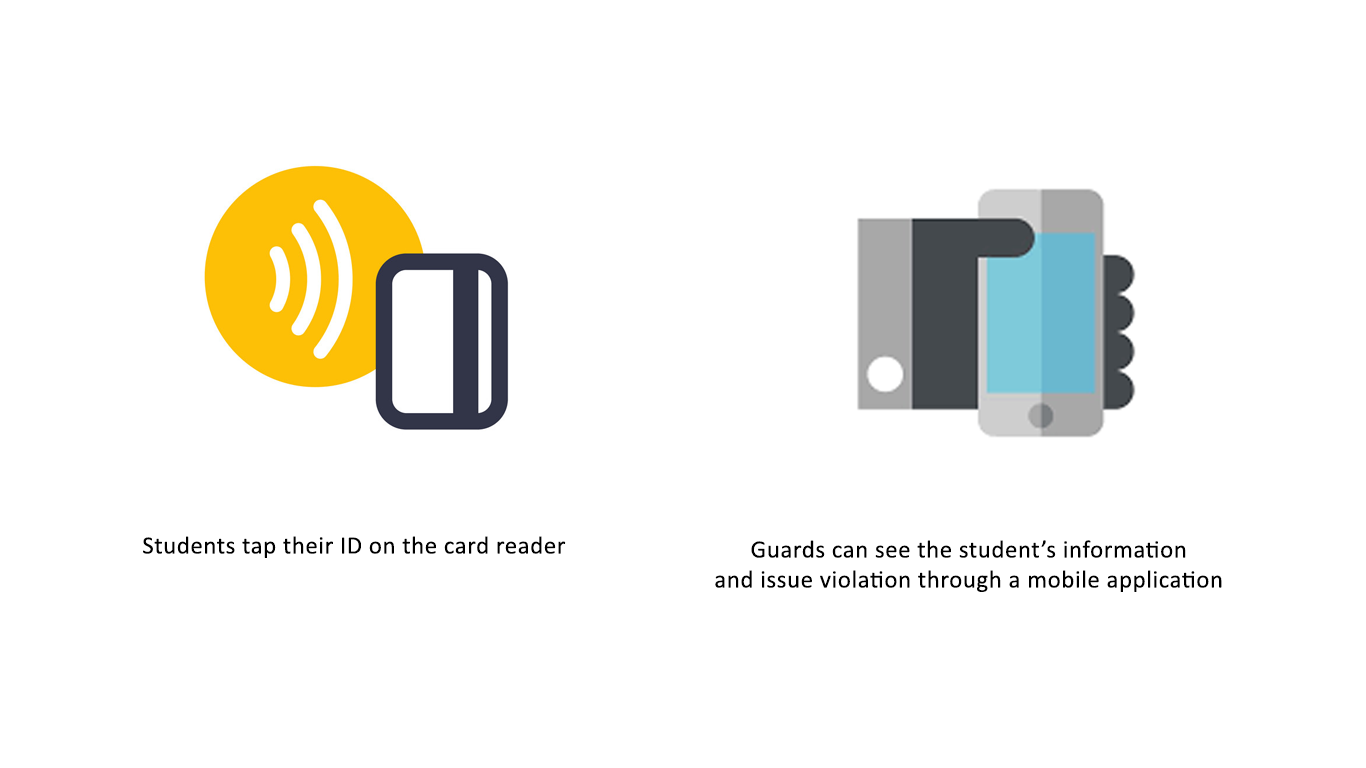
<style>
.page{position:relative;width:1366px;height:768px;background:#ffffff}
.page>*{position:absolute;margin:0}
.t1{font:25px "Calibri";letter-spacing:0.02em;color:#000000}
</style>
<div class="page">
<p class="t1" style="left:143px;top:536px;width:423px;height:22px">Students tap their ID on the card reader</p>
<p class="t1" style="left:715px;top:540px;width:507px;height:52px;text-align:center">Guards can see the student’s information<br>and issue violation through a mobile application</p>
</div>
